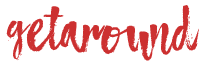
<style>
.page{position:relative;width:200px;height:63px;background:#ffffff}
.page>*{position:absolute;margin:0}
.t1{font:55.7px "AtmosphereScriptTypeface";color:#cc3030}
</style>
<div class="page">
<p class="t1" style="left:6px;top:5px;width:193px;height:56px">getaround</p>
</div>
